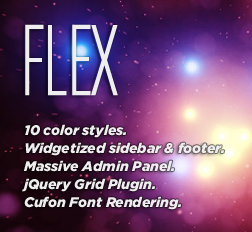
<style>
.page{position:relative;width:252px;height:232px}
.page>*{position:absolute;margin:0}
.t1{font:108.1px "ChaletComprime-MilanEighty";letter-spacing:-0.01em;color:#ffffff;text-transform:uppercase}
.t2{font:14px/18px "Gotham-BlackItalic";letter-spacing:-0.01em;color:#ffffff}
</style>
<div class="page">
<p class="t1" style="left:25px;top:24px;width:93px;height:72px">FLEX</p>
<p class="t2" style="left:22px;top:124px;width:203px;height:86px">10 color styles.<br>Widgetized sidebar &amp; footer.<br>Massive Admin Panel.<br>jQuery Grid Plugin.<br>Cufon Font Rendering.</p>
</div>
